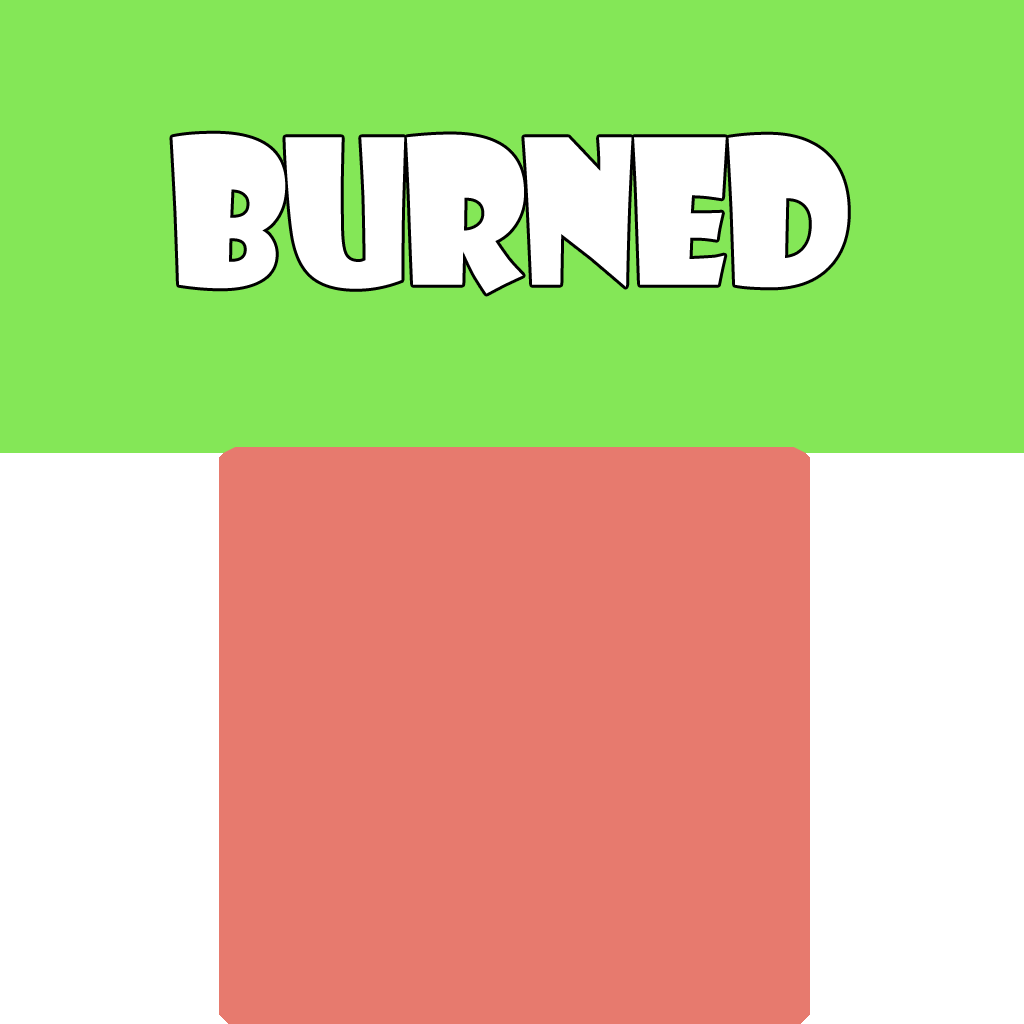
<style>
.page{position:relative;width:1024px;height:1024px;background:#84e757}
.page>*{position:absolute;margin:0}
.t1{font:196.1px "ShowcardGothic-Reg";letter-spacing:-0.025em;color:#ffffff;scale:0.91 1}
</style>
<div class="page">
<p class="t1" style="left:172px;top:133px;width:676px;height:161px">Burned</p>
</div>
